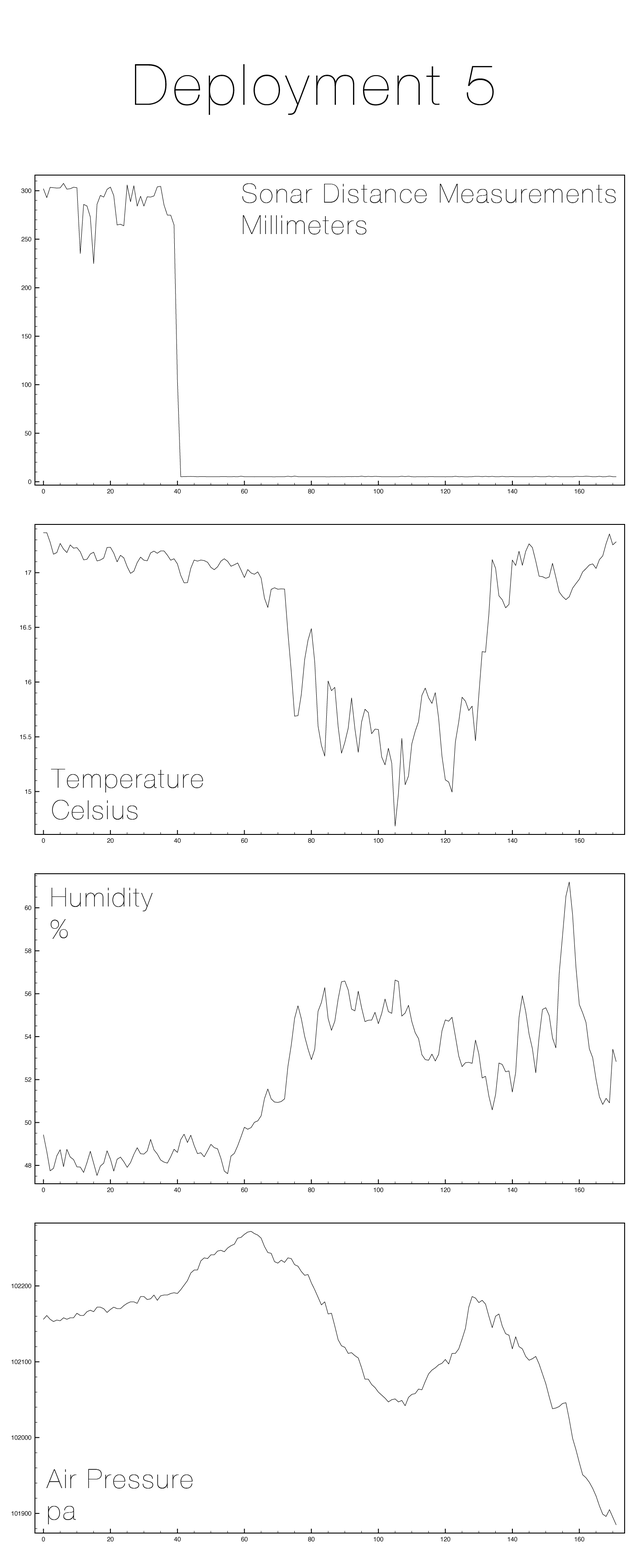
<style>
.page{position:relative;width:629px;height:1568px;background:#ffffff}
.page>*{position:absolute;margin:0}
.t1{font:56.8px "HelveticaNeue-UltraLight";letter-spacing:0.075em;color:#000000}
.t2{font:26.2px "HelveticaNeue-UltraLight";letter-spacing:0.075em;color:#000000}
</style>
<div class="page">
<p class="t1" style="left:135px;top:64px;width:359px;height:51px">Deployment 5</p>
<p class="t2" style="left:242px;top:183px;width:374px;height:51px">Sonar Distance Measurements<br>Millimeters</p>
<p class="t2" style="left:51px;top:769px;width:152px;height:51px">Temperature<br>Celsius</p>
<p class="t2" style="left:51px;top:888px;width:102px;height:51px">Humidity<br>%</p>
<p class="t2" style="left:46px;top:1469px;width:147px;height:55px">Air Pressure<br>pa</p>
</div>
